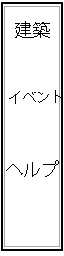
<style>
.page{position:relative;width:64px;height:256px;background:#ffffff}
.page>*{position:absolute;margin:0}
.t1{font:18px "KozGoPr6N-Regular";color:#000000}
.t2{font:12px "KozGoPr6N-Regular";color:#000000}
.t3{font:14px "KozGoPr6N-Regular";color:#000000}
</style>
<div class="page">
<p class="t1" style="left:15px;top:21px;width:35px;height:17px"><span class="t2"><br></span>建築</p>
<p class="t3" style="left:9px;top:90px;width:52px;height:14px">イベント</p>
<p class="t1" style="left:6px;top:160px;width:53px;height:17px">ヘルプ</p>
</div>
